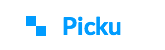
<style>
.page{position:relative;width:165px;height:50px;background:#ffffff}
.page>*{position:absolute;margin:0}
.t1{font:24px "Lato-Bold";color:#009cff}
</style>
<div class="page">
<p class="t1" style="left:63px;top:16px;width:58px;height:20px">Picku</p>
</div>
